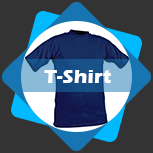
<style>
.page{position:relative;width:153px;height:153px;background:#333333}
.page>*{position:absolute;margin:0}
.t1{font:20.3px "ErasITC-Bold";color:#ffffff}
</style>
<div class="page">
<p class="t1" style="left:44px;top:70px;width:67px;height:13px">T-Shirt</p>
</div>
